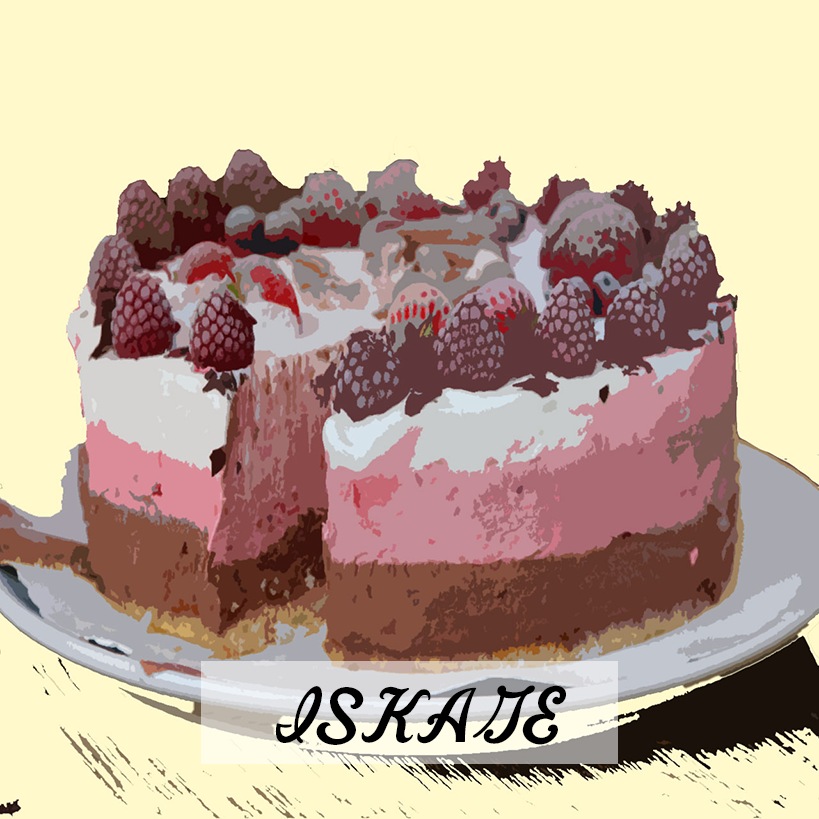
<style>
.page{position:relative;width:819px;height:819px;background:#fff9cb}
.page>*{position:absolute;margin:0}
.t1{font:72px "FenwayParkJF";letter-spacing:0.025em;color:#000000}
</style>
<div class="page">
<p class="t1" style="left:275px;top:685px;width:291px;height:60px">ISKAGE</p>
</div>
